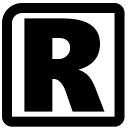
<style>
.page{position:relative;width:128px;height:128px;background:#000000}
.page>*{position:absolute;margin:0}
.t1{font:133.3px "SegoeUIBlack";letter-spacing:-0.005em;color:#000000}
</style>
<div class="page">
<p class="t1" style="left:24px;top:18px;width:81px;height:94px">R</p>
</div>
